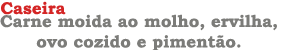
<style>
.page{position:relative;width:300px;height:50px;background:#ffffff}
.page>*{position:absolute;margin:0}
.t1{font:17px "BookmanOldStyle-Bold";color:#d42525}
.t2{font:17px "BookmanOldStyle-Bold";color:#7c7c79}
</style>
<div class="page">
<p class="t1" style="left:1px;top:1px;width:65px;height:14px">Caseira</p>
<p class="t2" style="left:0px;top:14px;width:277px;height:38px;text-align:center">Carne moida ao molho, ervilha,<br>ovo cozido e pimentão.</p>
</div>
